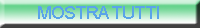
<style>
.page{position:relative;width:200px;height:28px}
.page>*{position:absolute;margin:0}
.t1{font:18px "ArialMT";letter-spacing:-0.06em;color:#5aa4e9}
</style>
<div class="page">
<p class="t1" style="left:38px;top:6px;width:121px;height:13px">MOSTRA TUTTI</p>
</div>
